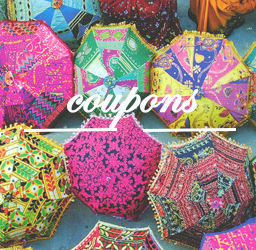
<style>
.page{position:relative;width:256px;height:250px}
.page>*{position:absolute;margin:0}
.t1{font:60px "EdwardianScriptITC";color:#f9fafb;font-weight:bold}
</style>
<div class="page">
<p class="t1" style="left:67px;top:86px;width:132px;height:43px">coupons</p>
</div>
